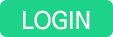
<style>
.page{position:relative;width:113px;height:37px;background:#1cd389}
.page>*{position:absolute;margin:0}
.t1{font:25px "SeoulNamsanB";color:#ffffff}
</style>
<div class="page">
<p class="t1" style="left:23px;top:10px;width:67px;height:20px">LOGIN</p>
</div>
